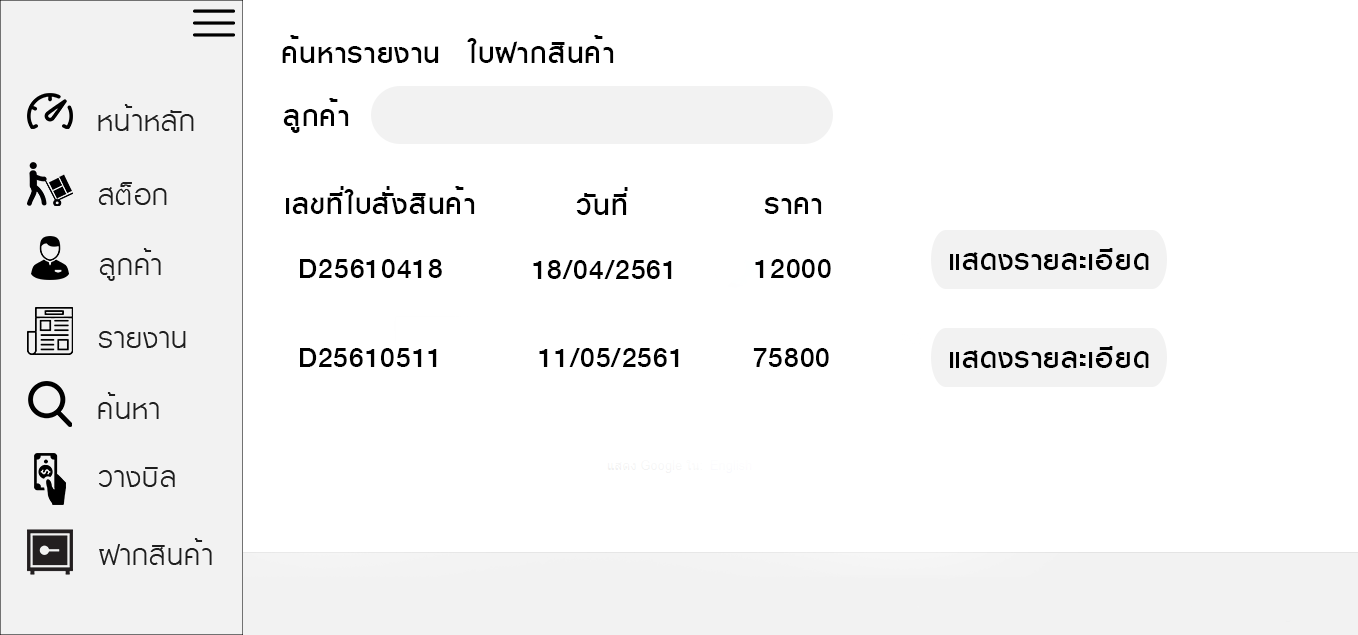
<style>
.page{position:relative;width:1358px;height:635px;background:#ffffff}
.page>*{position:absolute;margin:0}
.t1{font:40px "KittithadaMedium65P";letter-spacing:0.025em;color:#000000}
</style>
<div class="page">
<p class="t1" style="left:282px;top:35px;width:157px;height:28px">ค้นหารายงาน</p>
<p class="t1" style="left:467px;top:35px;width:147px;height:28px">ใบฝากสินค้า</p>
<p class="t1" style="left:283px;top:98px;width:66px;height:35px">ลูกค้า</p>
<p class="t1" style="left:286px;top:186px;width:189px;height:28px">เลขที่ใบสั่งสินค้า</p>
<p class="t1" style="left:576px;top:187px;width:52px;height:28px">วันที่</p>
<p class="t1" style="left:764px;top:197px;width:58px;height:17px">ราคา</p>
<p class="t1" style="left:950px;top:248px;width:199px;height:22px">แสดงรายละเอียด</p>
<p class="t1" style="left:300px;top:259px;width:142px;height:19px">D25610418</p>
<p class="t1" style="left:533px;top:260px;width:139px;height:19px">18/04/2561</p>
<p class="t1" style="left:755px;top:259px;width:76px;height:19px">12000</p>
<p class="t1" style="left:300px;top:348px;width:137px;height:19px">D25610511</p>
<p class="t1" style="left:539px;top:348px;width:140px;height:19px">11/05/2561</p>
<p class="t1" style="left:753px;top:348px;width:76px;height:19px">75800</p>
<p class="t1" style="left:950px;top:346px;width:199px;height:22px">แสดงรายละเอียด</p>
</div>
